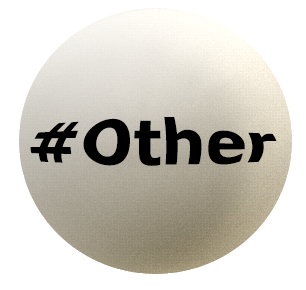
<style>
.page{position:relative;width:306px;height:290px;background:#ffffff}
.page>*{position:absolute;margin:0}
.t1{font:50px "Verdana-Bold";color:#000000}
</style>
<div class="page">
<p class="t1" style="left:30px;top:117px;width:247px;height:49px">#Other</p>
</div>
